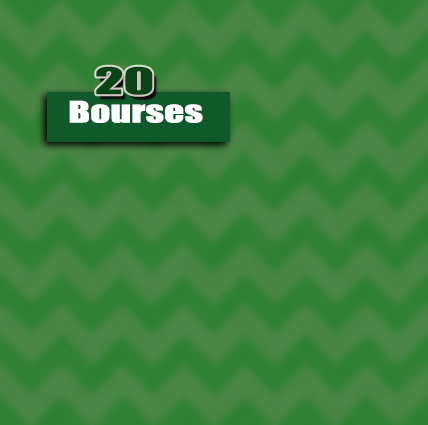
<style>
.page{position:relative;width:428px;height:425px}
.page>*{position:absolute;margin:0}
.t1{font:34px "Impact";color:#0a4315;scale:1.68 1}
.t2{font:27.5px "Impact";color:#ffffff;scale:1.44 1}
</style>
<div class="page">
<p class="t1" style="left:96px;top:66px;width:57px;height:29px">20</p>
<p class="t2" style="left:69px;top:100px;width:134px;height:23px">Bourses</p>
</div>
